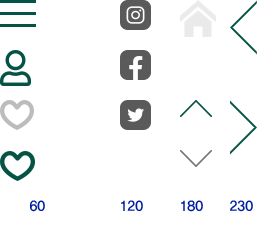
<style>
.page{position:relative;width:270px;height:250px;background:#ffffff}
.page>*{position:absolute;margin:0}
.t1{font:14px "YDIYGO340";color:#001ea1}
</style>
<div class="page">
<p class="t1" style="left:30px;top:200px;width:15px;height:12px">60</p>
<p class="t1" style="left:121px;top:200px;width:22px;height:11px">120</p>
<p class="t1" style="left:181px;top:200px;width:22px;height:12px">180</p>
<p class="t1" style="left:230px;top:200px;width:23px;height:12px">230</p>
</div>
